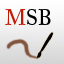
<style>
.page{position:relative;width:64px;height:64px}
.page>*{position:absolute;margin:0}
.t1{font:21.4px "ACaslonPro-Regular";color:#010000}
.t2{font:21.4px "ACaslonPro-Regular";color:#c21b05}
</style>
<div class="page">
<p class="t1" style="left:5px;top:9px;width:46px;height:16px"><span class="t2">M</span>SB</p>
</div>
